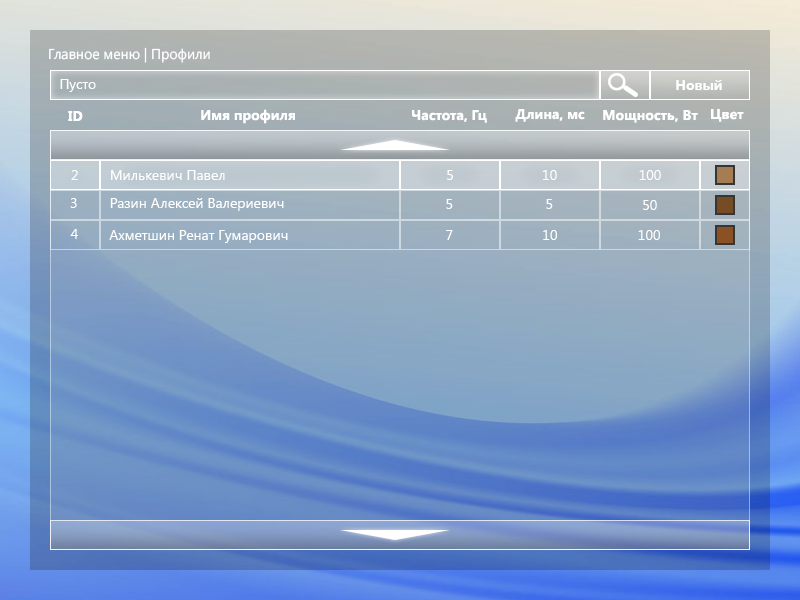
<style>
.page{position:relative;width:800px;height:600px}
.page>*{position:absolute;margin:0}
.t1{font:14.2px "SegoeUI";color:#ffffff}
.t2{font:14px "SegoeUI";color:#ffffff}
.t3{font:14px "SegoeUI-Bold";color:#ffffff}
</style>
<div class="page">
<p class="t1" style="left:49px;top:47px;width:161px;height:16px">Главное меню | Профили</p>
<p class="t2" style="left:60px;top:79px;width:36px;height:13px">Пусто</p>
<p class="t3" style="left:676px;top:80px;width:46px;height:10px">Новый</p>
<p class="t3" style="left:68px;top:111px;width:15px;height:10px">ID</p>
<p class="t3" style="left:201px;top:109px;width:94px;height:15px">Имя профиля</p>
<p class="t3" style="left:412px;top:110px;width:75px;height:13px">Частота, Гц</p>
<p class="t3" style="left:515px;top:109px;width:70px;height:13px">Длина, мс</p>
<p class="t3" style="left:603px;top:110px;width:95px;height:13px">Мощность, Вт</p>
<p class="t3" style="left:711px;top:109px;width:33px;height:13px">Цвет</p>
<p class="t2" style="left:71px;top:170px;width:7px;height:10px">2</p>
<p class="t2" style="left:111px;top:170px;width:114px;height:10px">Милькевич Павел</p>
<p class="t2" style="left:447px;top:170px;width:6px;height:10px">5</p>
<p class="t2" style="left:543px;top:170px;width:14px;height:10px">10</p>
<p class="t2" style="left:639px;top:170px;width:22px;height:10px">100</p>
<p class="t2" style="left:70px;top:198px;width:7px;height:10px">3</p>
<p class="t2" style="left:110px;top:198px;width:174px;height:13px">Разин Алексей Валериевич</p>
<p class="t2" style="left:446px;top:199px;width:7px;height:10px">5</p>
<p class="t2" style="left:546px;top:199px;width:7px;height:10px">5</p>
<p class="t2" style="left:643px;top:200px;width:14px;height:10px">50</p>
<p class="t2" style="left:70px;top:229px;width:8px;height:10px">4</p>
<p class="t2" style="left:109px;top:230px;width:179px;height:13px">Ахметшин Ренат Гумарович</p>
<p class="t2" style="left:446px;top:230px;width:7px;height:10px">7</p>
<p class="t2" style="left:543px;top:230px;width:14px;height:10px">10</p>
<p class="t2" style="left:638px;top:230px;width:22px;height:10px">100</p>
</div>
